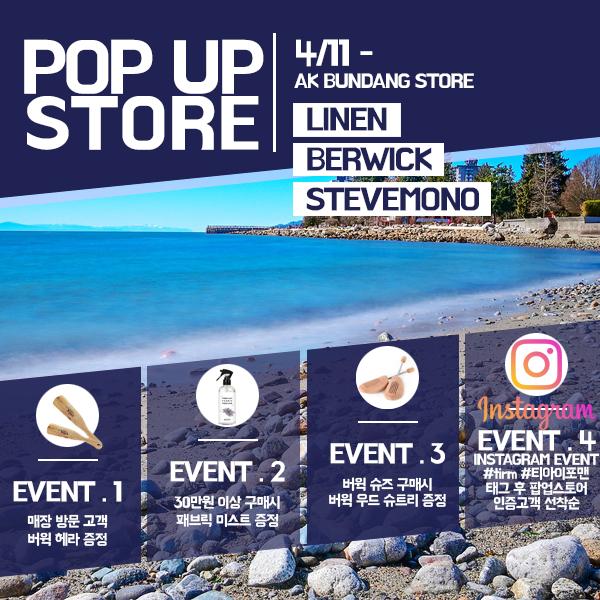
<style>
.page{position:relative;width:600px;height:600px;background:#202253}
.page>*{position:absolute;margin:0}
.t1{font:73.7px/42.9px "BMHANNAPro";letter-spacing:-0.06em;color:#ffffff}
.t2{font:73.7px/55.6px "BMHANNAPro";color:#ffffff}
.t3{font:20px/22.8px "BMHANNAPro";letter-spacing:-0.06em;color:#ffffff}
.t4{font:36px/40.8px "BMHANNAPro";letter-spacing:-0.06em;color:#ffffff}
.t5{font:31.8px "BMHANNAPro";letter-spacing:-0.06em;color:#202253}
.t6{font:15.2px/14.6px "BMHANNAPro";letter-spacing:-0.06em;color:#ffffff}
.t7{font:27.8px/17.2px "BMHANNAPro";letter-spacing:-0.06em;color:#ffffff}
.t8{font:15.2px/16.3px "BMHANNAPro";letter-spacing:-0.06em;color:#ffffff}
.t9{font:15.2px/26.4px "BMHANNAPro";letter-spacing:-0.06em;color:#ffffff}
.t10{font:15.2px/18.9px "BMHANNAPro";letter-spacing:-0.06em;color:#ffffff}
.t11{font:15.2px/25.6px "BMHANNAPro";letter-spacing:-0.06em;color:#ffffff}
.t12{font:15.2px/18px "BMHANNAPro";letter-spacing:-0.06em;color:#ffffff}
</style>
<div class="page">
<p class="t1" style="left:24px;top:39px;width:240px;height:111px;text-align:center">POP UP<br><span class="t2">STORE</span></p>
<p class="t3" style="left:294px;top:39px;width:180px;height:49px"><span class="t4">4/11 -<br></span>AK BUNDANG STORE</p>
<p class="t5" style="left:307px;top:107px;width:80px;height:24px">LINEN</p>
<p class="t5" style="left:307px;top:147px;width:125px;height:24px">BERWICK</p>
<p class="t5" style="left:306px;top:187px;width:173px;height:24px">STEVEMONO</p>
<p class="t6" style="left:474px;top:430px;width:126px;height:80px;text-align:center"><span class="t7">EVENT . 4<br></span>INSTAGRAM EVENT<br>#tirm #티아이포맨<br>태그 후 팝업스토어<br>인증고객 선착순</p>
<p class="t8" style="left:329px;top:443px;width:117px;height:64px;text-align:center"><span class="t7">EVENT . 3<br></span><span class="t9">버윅 슈즈 구매시<br></span>버윅 우드 슈트리 증정</p>
<p class="t9" style="left:170px;top:461px;width:115px;height:66px;text-align:center"><span class="t7">EVENT . 2<br></span>30만원 이상 구매시<br><span class="t10">패브릭 미스트 증정</span></p>
<p class="t7" style="left:13px;top:481px;width:109px;height:65px;text-align:center">EVENT . 1<br><span class="t11">매장 방문 고객<br></span><span class="t12">버윅 헤라 증정</span></p>
</div>
